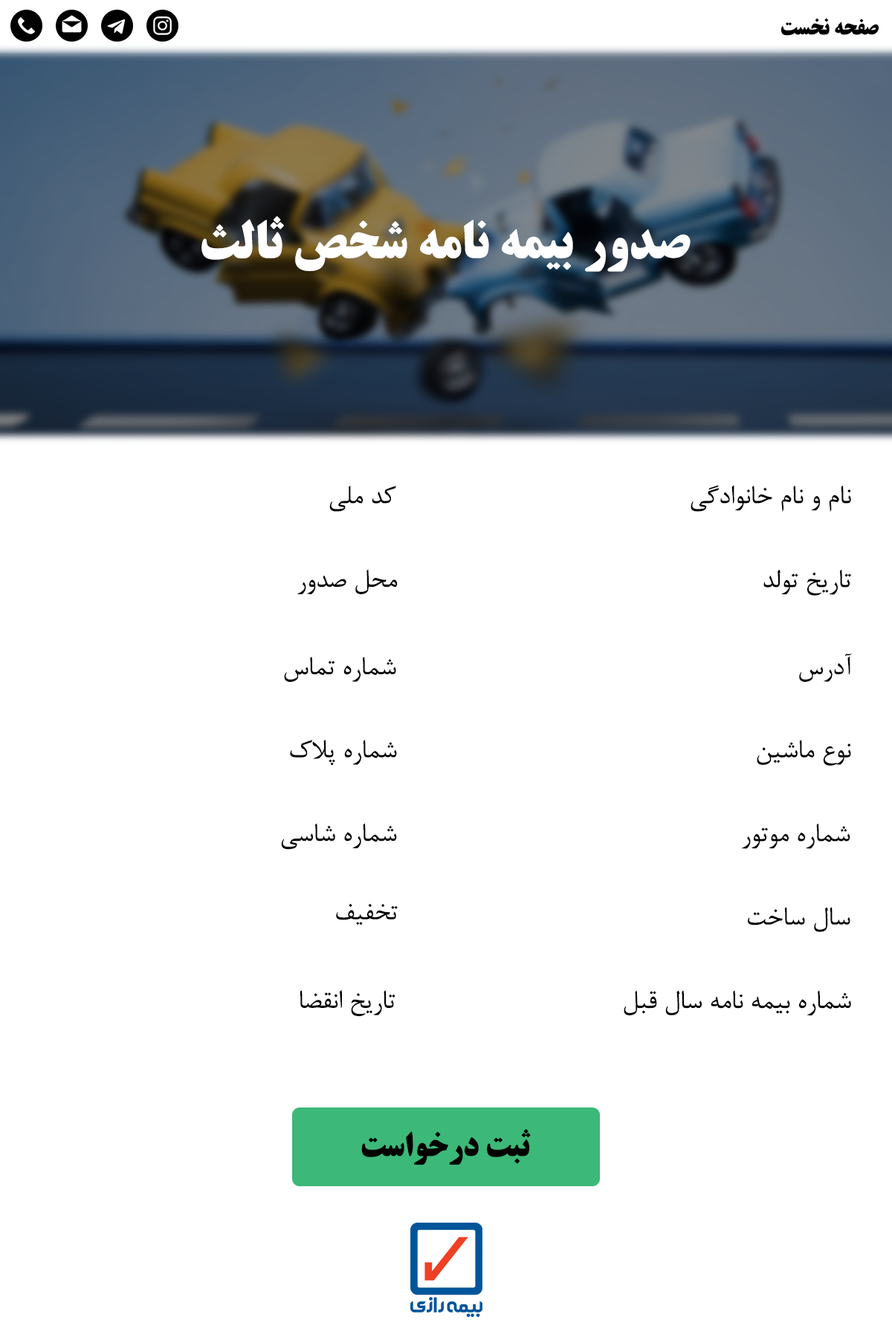
<style>
.page{position:relative;width:892px;height:1337px;background:#ffffff}
.page>*{position:absolute;margin:0}
.t1{font:22.3px "BTitrBold";color:#000000}
.t2{font:52px "BTitrBold";color:#ffffff}
.t3{font:29.7px "BNazanin";color:#000000}
.t4{font:33.4px "BTitrBold";color:#000000}
</style>
<div class="page">
<p class="t1" style="left:781px;top:18px;width:98px;height:18px">صفحه نخست</p>
<p class="t2" style="left:201px;top:216px;width:489px;height:56px">صدور بیمه نامه شخص ثالث</p>
<p class="t3" style="left:329px;top:485px;width:67px;height:27px">کد ملی</p>
<p class="t3" style="left:690px;top:485px;width:161px;height:27px">نام و نام خانوادگی</p>
<p class="t3" style="left:297px;top:569px;width:101px;height:25px">محل صدور</p>
<p class="t3" style="left:763px;top:569px;width:88px;height:27px">تاریخ تولد</p>
<p class="t3" style="left:799px;top:654px;width:52px;height:28px">آدرس</p>
<p class="t3" style="left:284px;top:657px;width:112px;height:25px">شماره تماس</p>
<p class="t3" style="left:290px;top:740px;width:107px;height:26px">شماره پلاک</p>
<p class="t3" style="left:756px;top:740px;width:95px;height:26px">نوع ماشین</p>
<p class="t3" style="left:281px;top:823px;width:116px;height:27px">شماره شاسی</p>
<p class="t3" style="left:742px;top:824px;width:108px;height:25px">شماره موتور</p>
<p class="t3" style="left:336px;top:903px;width:62px;height:23px">تخفیف</p>
<p class="t3" style="left:747px;top:907px;width:103px;height:25px">سال ساخت</p>
<p class="t3" style="left:299px;top:990px;width:96px;height:26px">تاریخ انقضا</p>
<p class="t3" style="left:623px;top:990px;width:228px;height:26px">شماره بیمه نامه سال قبل</p>
<p class="t4" style="left:361px;top:1129px;width:170px;height:36px">ثبت درخواست</p>
</div>
